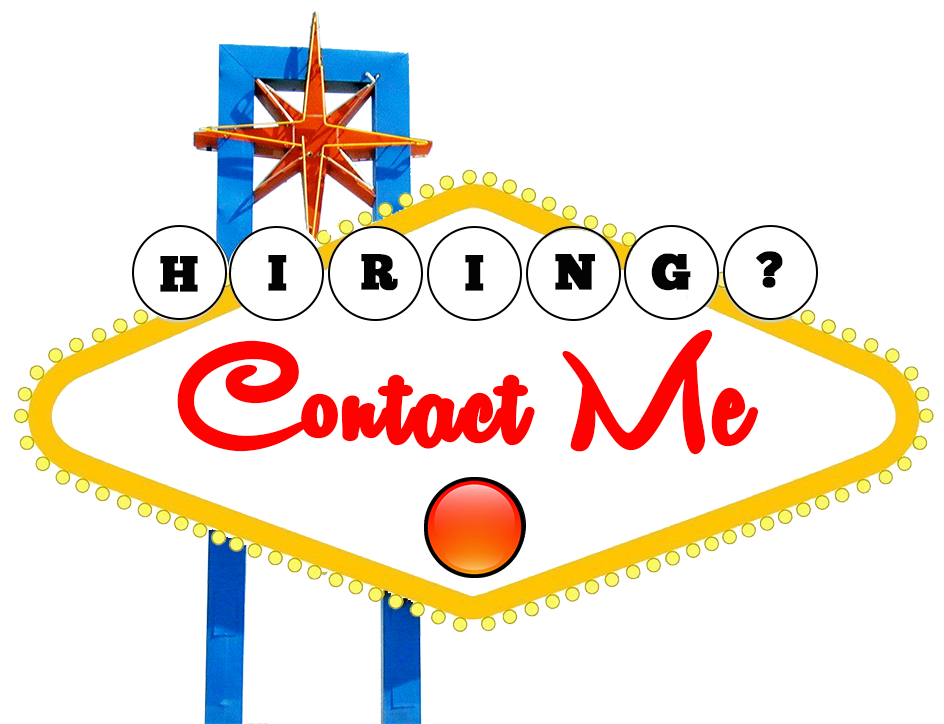
<style>
.page{position:relative;width:944px;height:724px;background:#ffffff}
.page>*{position:absolute;margin:0}
.t1{font:50px "ChunkFive-Roman";color:#030303;font-weight:bold}
.t2{font:160px "RemachineScriptPersonalUseOnly";color:#fe0101;font-weight:bold}
</style>
<div class="page">
<p class="t1" style="left:160px;top:256px;width:38px;height:36px">H</p>
<p class="t1" style="left:268px;top:255px;width:19px;height:36px">I</p>
<p class="t1" style="left:361px;top:254px;width:37px;height:37px">R</p>
<p class="t1" style="left:465px;top:255px;width:19px;height:36px">I</p>
<p class="t1" style="left:555px;top:254px;width:40px;height:36px">N</p>
<p class="t1" style="left:651px;top:253px;width:40px;height:38px">G</p>
<p class="t1" style="left:756px;top:251px;width:27px;height:37px">?</p>
<p class="t2" style="left:177px;top:329px;width:582px;height:126px">Contact Me</p>
</div>
